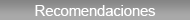
<style>
.page{position:relative;width:190px;height:20px;background:#a9a9a9}
.page>*{position:absolute;margin:0}
.t1{font:14.6px "ArialMT";color:#ffffff}
</style>
<div class="page">
<p class="t1" style="left:35px;top:5px;width:121px;height:11px">Recomendaciones</p>
</div>
